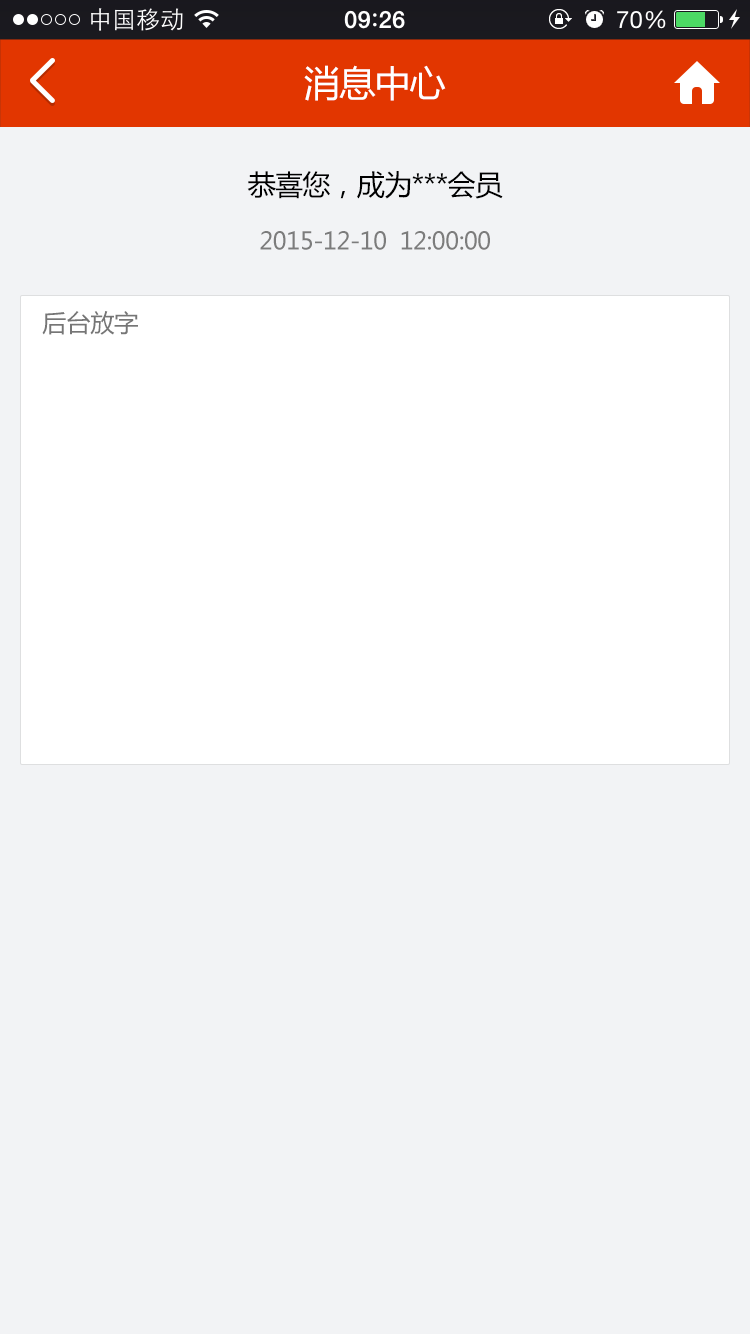
<style>
.page{position:relative;width:750px;height:1334px;background:#f2f3f5}
.page>*{position:absolute;margin:0}
.t1{font:36px "MicrosoftYaHei";letter-spacing:-0.025em;color:#ffffff}
.t2{font:28px "MicrosoftYaHei";letter-spacing:-0.025em;color:#000000}
.t3{font:24px "MicrosoftYaHei";letter-spacing:-0.025em;color:#7c7c7c}
.t4{font:24px "MicrosoftYaHei";color:#767676}
</style>
<div class="page">
<p class="t1" style="left:304px;top:65px;width:142px;height:36px">消息中心</p>
<p class="t2" style="left:247px;top:171px;width:256px;height:28px">恭喜您，成为***会员</p>
<p class="t3" style="left:260px;top:231px;width:230px;height:19px">2015-12-10  12:00:00</p>
<p class="t4" style="left:42px;top:311px;width:96px;height:24px">后台放字</p>
</div>
